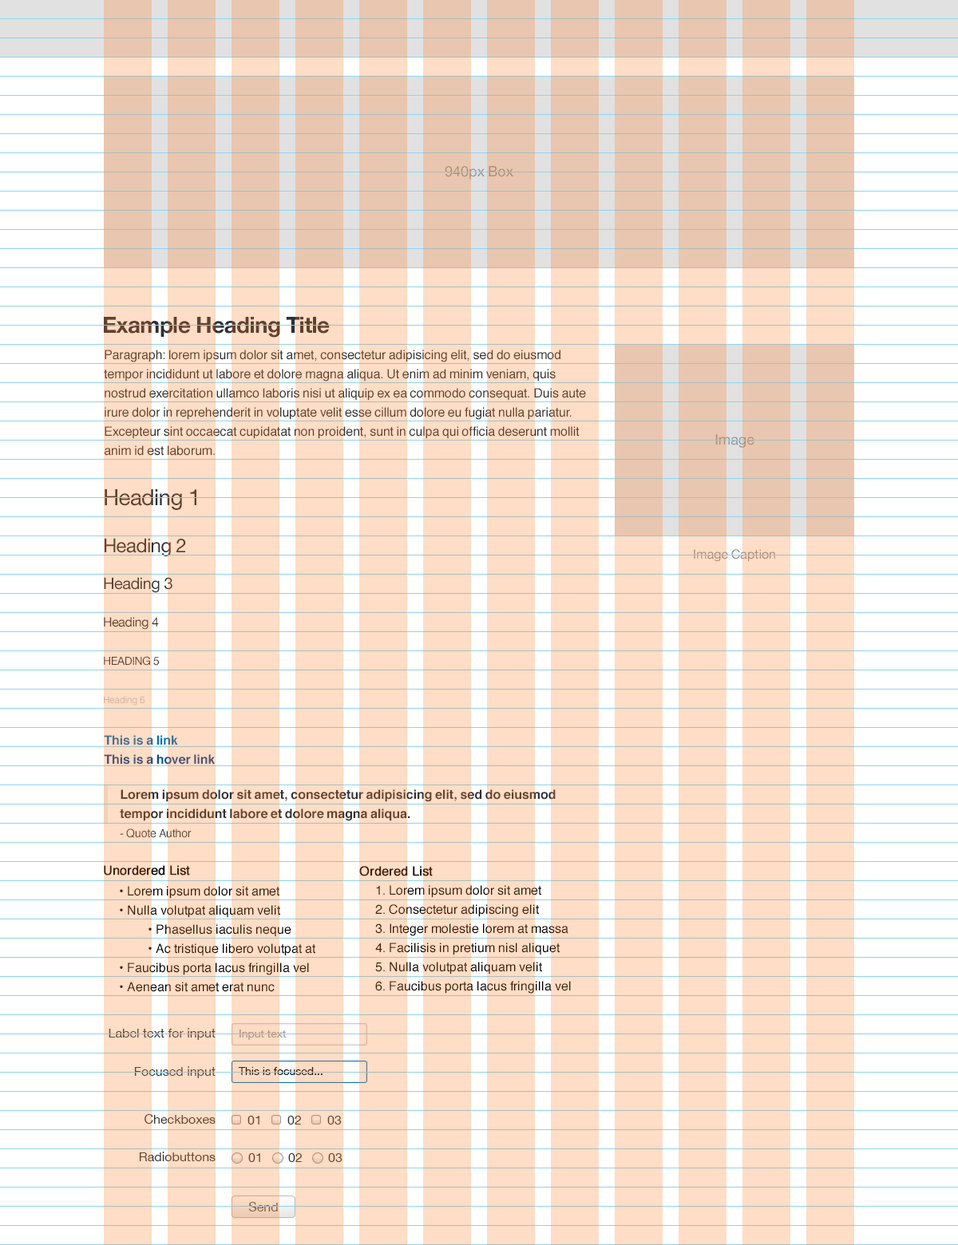
<style>
.page{position:relative;width:958px;height:1245px;background:#ffffff}
.page>*{position:absolute;margin:0}
.t1{font:14.4px "HelveticaNeue";color:#b08d76}
.t2{font:22.3px "HelveticaNeue-Bold";letter-spacing:-0.025em;color:#604231}
.t3{font:12.8px/19.2px "Helvetica";color:#66442d}
.t4{font:14.4px "HelveticaNeue"}
.t5{font:22.3px "HelveticaNeue";letter-spacing:-0.025em;color:#604231}
.t6{font:19.2px "HelveticaNeue";letter-spacing:-0.025em;color:#604231}
.t7{font:12.8px "HelveticaNeue"}
.t8{font:16px "HelveticaNeue";letter-spacing:-0.025em;color:#604231}
.t9{font:12.8px "HelveticaNeue";letter-spacing:-0.025em;color:#604231}
.t10{font:11.2px "HelveticaNeue";letter-spacing:-0.025em;color:#604231;text-transform:uppercase}
.t11{font:9.6px "HelveticaNeue";letter-spacing:-0.025em;color:#d7b49d}
.t12{font:12.8px/19.2px "Helvetica-Bold"}
.t13{font:12.8px/19.2px "Helvetica-Bold";color:#66442d}
.t14{font:11.2px "Helvetica";color:#66442d}
.t15{font:12.8px "Helvetica";color:#401e07;font-weight:bold}
.t16{font:12.8px/19.2px "Helvetica";color:#401e07}
.t17{font:12.8px "HelveticaNeue";color:#66442d}
.t18{font:11.2px "HelveticaNeue";color:#b8957e}
.t19{font:11.2px "HelveticaNeue";color:#401e07}
.t20{font:12.8px "HelveticaNeue";color:#7d5b44}
</style>
<div class="page">
<p class="t1" style="left:445px;top:166px;width:68px;height:14px">940px Box</p>
<p class="t2" style="left:104px;top:317px;width:226px;height:21px">Example Heading Title</p>
<p class="t3" style="left:104px;top:350px;width:482px;height:106px">Paragraph: lorem ipsum dolor sit amet, consectetur adipisicing elit, sed do eiusmod tempor incididunt ut labore et dolore magna aliqua. Ut enim ad minim veniam, quis nostrud exercitation ullamco laboris nisi ut aliquip ex ea commodo consequat. Duis aute irure dolor in reprehenderit in voluptate velit esse cillum dolore eu fugiat nulla pariatur. Excepteur sint occaecat cupidatat non proident, sunt in culpa qui officia deserunt mollit anim id est laborum.</p>
<p class="t4" style="left:715px;top:434px;width:39px;height:14px">Image</p>
<p class="t5" style="left:105px;top:489px;width:91px;height:21px">Heading 1</p>
<p class="t6" style="left:105px;top:538px;width:81px;height:18px">Heading 2</p>
<p class="t7" style="left:694px;top:549px;width:81px;height:13px">Image Caption</p>
<p class="t8" style="left:104px;top:577px;width:68px;height:16px">Heading 3</p>
<p class="t9" style="left:104px;top:617px;width:55px;height:13px">Heading 4</p>
<p class="t10" style="left:104px;top:656px;width:55px;height:10px">Heading 5</p>
<p class="t11" style="left:104px;top:696px;width:40px;height:10px">Heading 6</p>
<p class="t12" style="left:104px;top:735px;width:111px;height:30px">This is a link<br>This is a hover link</p>
<p class="t13" style="left:120px;top:789px;width:435px;height:32px">Lorem ipsum dolor sit amet, consectetur adipisicing elit, sed do eiusmod tempor incididunt labore et dolore magna aliqua.</p>
<p class="t14" style="left:120px;top:828px;width:72px;height:10px">- Quote Author</p>
<p class="t15" style="left:104px;top:865px;width:86px;height:11px">Unordered List</p>
<p class="t15" style="left:359px;top:866px;width:74px;height:10px">Ordered List</p>
<p class="t16" style="left:120px;top:886px;width:195px;height:106px">• Lorem ipsum dolor sit amet<br>• Nulla volutpat aliquam velit <br> • Phasellus iaculis neque<br> • Ac tristique libero volutpat at<br>• Faucibus porta lacus fringilla vel<br>• Aenean sit amet erat nunc</p>
<p class="t16" style="left:375px;top:885px;width:196px;height:109px">1. Lorem ipsum dolor sit amet<br>2. Consectetur adipiscing elit<br>3. Integer molestie lorem at massa<br>4. Facilisis in pretium nisl aliquet<br>5. Nulla volutpat aliquam velit <br>6. Faucibus porta lacus fringilla vel</p>
<p class="t17" style="left:109px;top:1028px;width:106px;height:12px">Label text for input</p>
<p class="t18" style="left:239px;top:1030px;width:48px;height:10px">Input text</p>
<p class="t7" style="left:134px;top:1066px;width:81px;height:12px">Focused input</p>
<p class="t19" style="left:238px;top:1067px;width:84px;height:8px">This is focused...</p>
<p class="t17" style="left:144px;top:1114px;width:71px;height:10px">Checkboxes</p>
<p class="t17" style="left:247px;top:1116px;width:12px;height:9px">01</p>
<p class="t7" style="left:287px;top:1116px;width:14px;height:9px">02</p>
<p class="t17" style="left:327px;top:1116px;width:15px;height:9px">03</p>
<p class="t17" style="left:139px;top:1152px;width:76px;height:9px">Radiobuttons</p>
<p class="t17" style="left:248px;top:1153px;width:12px;height:9px">01</p>
<p class="t7" style="left:288px;top:1153px;width:14px;height:9px">02</p>
<p class="t17" style="left:328px;top:1153px;width:14px;height:9px">03</p>
<p class="t20" style="left:248px;top:1202px;width:30px;height:10px">Send</p>
</div>
